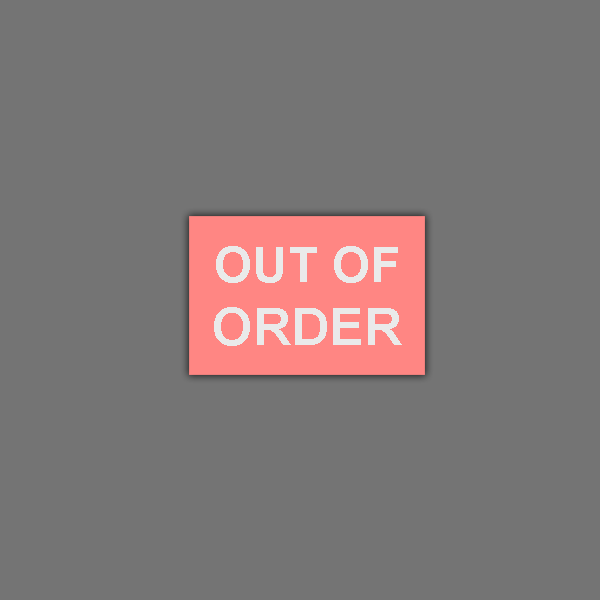
<style>
.page{position:relative;width:600px;height:600px;background:#747474}
.page>*{position:absolute;margin:0}
.t1{font:49.2px "Arial-BoldMT";color:#eaeaea}
.t2{font:52.5px "Arial-BoldMT";color:#eaeaea}
</style>
<div class="page">
<p class="t1" style="left:214px;top:246px;width:188px;height:100px;text-align:center">OUT OF<br><span class="t2">ORDER</span></p>
</div>
